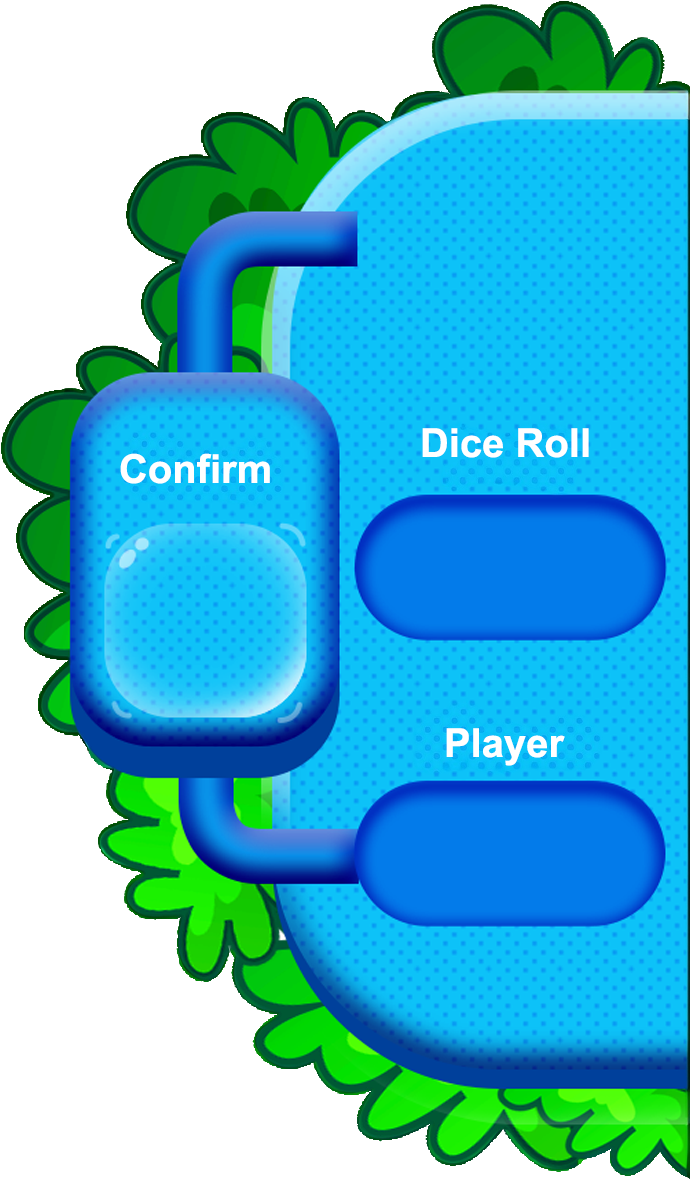
<style>
.page{position:relative;width:691px;height:1180px;background:#ffffff}
.page>*{position:absolute;margin:0}
.t1{font:40px "Arial-BoldMT";color:#ffffff}
</style>
<div class="page">
<p class="t1" style="left:422px;top:428px;width:167px;height:30px">Dice Roll</p>
<p class="t1" style="left:120px;top:453px;width:150px;height:31px">Confirm</p>
<p class="t1" style="left:446px;top:728px;width:119px;height:38px">Player</p>
</div>
